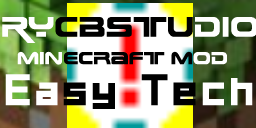
<style>
.page{position:relative;width:256px;height:128px;background:#ffffff}
.page>*{position:absolute;margin:0}
.t1{font:27.8px "EarthNormal";color:#000000}
.t2{font:27.8px "EarthNormal";color:#ffffff}
.t3{font:17.1px "EarthNormal";color:#000000}
.t4{font:17.1px "EarthNormal";color:#ffffff}
.t5{font:42.1px "BigruixianBlackGBV1.0";color:#000000}
.t6{font:42.1px "BigruixianBlackGBV1.0";color:#ffffff}
</style>
<div class="page">
<p class="t1" style="left:2px;top:17px;width:256px;height:26px"><span class="t2">RY</span>CBStu<span class="t2">dio</span></p>
<p class="t3" style="left:17px;top:51px;width:210px;height:14px"><span class="t4">Min</span>ecraft M<span class="t4">od</span></p>
<p class="t5" style="left:5px;top:74px;width:248px;height:35px"><span class="t6">Ea</span>sy Te<span class="t6">ch</span></p>
</div>
